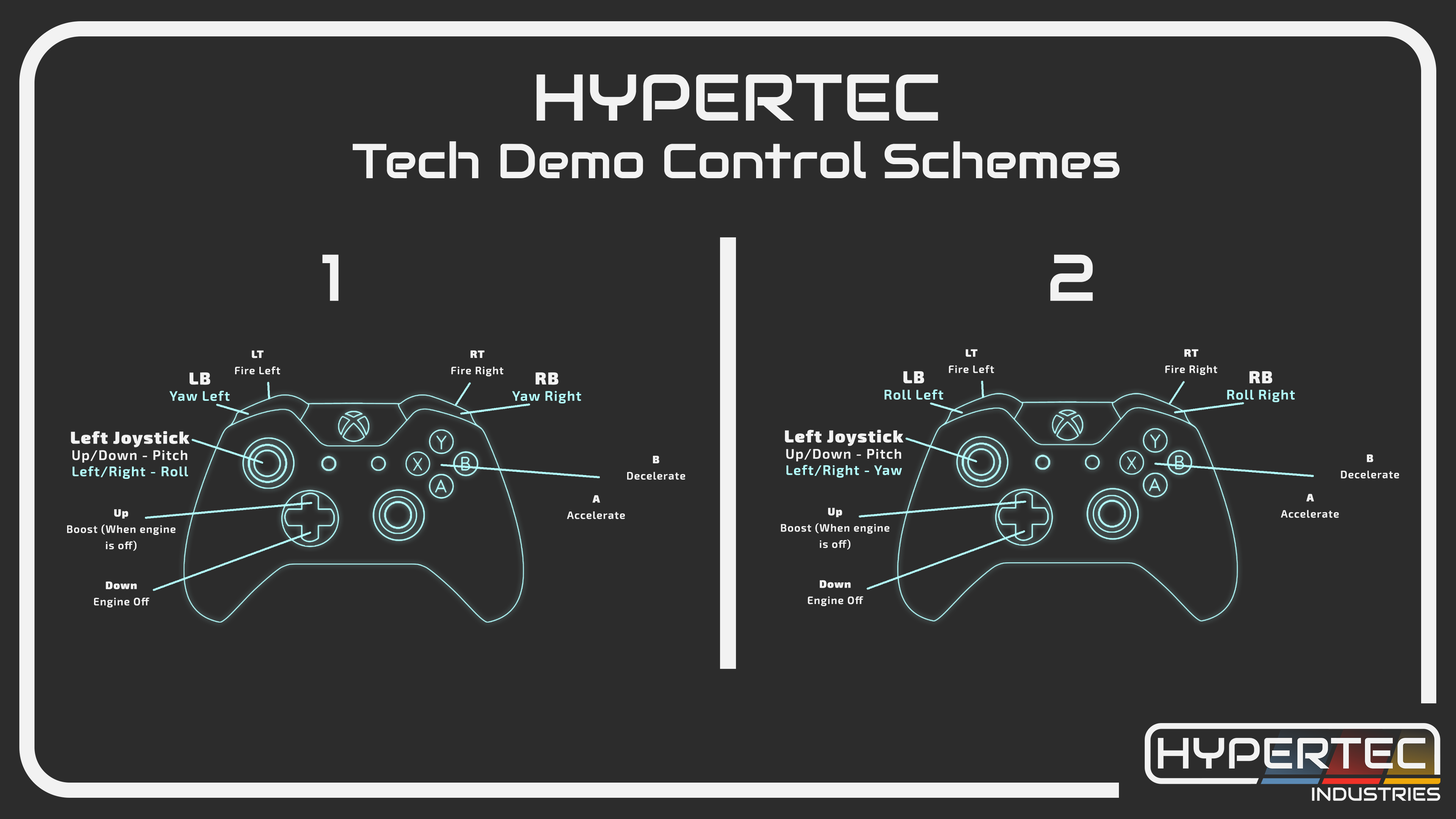
<style>
.page{position:relative;width:1456px;height:819px;background:#2c2c2c}
.page>*{position:absolute;margin:0}
.t1{font:48.9px/57.6px "Audiowide-Regular";color:#f2f2f2}
.t2{font:65.6px/57.6px "Audiowide-Regular";color:#f2f2f2}
.t3{font:65.6px "Audiowide-Regular";letter-spacing:5.2em;color:#f2f2f2}
.t4{font:10.6px/16.3px "Exo2-SemiBold";letter-spacing:0.06em;color:#f2f2f2}
.t5{font:10.6px/16.3px "Exo2-Black";letter-spacing:0.06em;color:#f2f2f2}
.t6{font:13.7px/16.3px "Exo2-SemiBold";letter-spacing:0.06em;color:#b4ffff}
.t7{font:17.1px/16.3px "Exo2-Black";letter-spacing:0.06em;color:#f2f2f2}
.t8{font:13.7px/16.3px "Exo2-SemiBold";letter-spacing:0.06em;color:#b3fdfd}
.t9{font:13.7px/16.3px "Exo2-SemiBold";letter-spacing:0.06em;color:#f2f2f2}
</style>
<div class="page">
<p class="t1" style="left:353px;top:74px;width:767px;height:104px;text-align:center"><span class="t2">HYPERTEC<br></span>Tech Demo Control Schemes</p>
<p class="t3" style="left:322px;top:254px;width:771px;height:47px">1 2</p>
<p class="t4" style="left:235px;top:350px;width:45px;height:25px;text-align:center"><span class="t5">LT<br></span>Fire Left</p>
<p class="t4" style="left:451px;top:350px;width:53px;height:27px;text-align:center"><span class="t5">RT<br></span>Fire Right</p>
<p class="t4" style="left:949px;top:349px;width:45px;height:24px;text-align:center"><span class="t5">LT<br></span>Fire Left</p>
<p class="t4" style="left:1165px;top:349px;width:52px;height:26px;text-align:center"><span class="t5">RT<br></span>Fire Right</p>
<p class="t6" style="left:169px;top:372px;width:61px;height:29px;text-align:center"><span class="t7">LB<br></span>Yaw Left</p>
<p class="t6" style="left:512px;top:372px;width:69px;height:31px;text-align:center"><span class="t7">RB<br></span>Yaw Right</p>
<p class="t8" style="left:885px;top:371px;width:58px;height:29px;text-align:center"><span class="t7">LB<br></span>Roll Left</p>
<p class="t8" style="left:1227px;top:371px;width:68px;height:31px;text-align:center"><span class="t7">RB<br></span>Roll Right</p>
<p class="t6" style="left:71px;top:431px;width:119px;height:48px;text-align:center"><span class="t7">Left Joystick<br></span><span class="t9">Up/Down - Pitch<br></span>Left/Right - Roll</p>
<p class="t6" style="left:785px;top:430px;width:119px;height:48px;text-align:center"><span class="t7">Left Joystick<br></span><span class="t9">Up/Down - Pitch<br></span>Left/Right - Yaw</p>
<p class="t4" style="left:627px;top:456px;width:58px;height:24px;text-align:center"><span class="t5">B<br></span>Decelerate</p>
<p class="t4" style="left:1341px;top:454px;width:58px;height:25px;text-align:center"><span class="t5">B<br></span>Decelerate</p>
<p class="t4" style="left:567px;top:495px;width:58px;height:24px;text-align:center"><span class="t5">A<br></span>Accelerate</p>
<p class="t4" style="left:1281px;top:494px;width:58px;height:24px;text-align:center"><span class="t5">A<br></span>Accelerate</p>
<p class="t4" style="left:67px;top:509px;width:109px;height:42px;text-align:center"><span class="t5">Up<br></span>Boost (When engine is off)</p>
<p class="t4" style="left:781px;top:508px;width:109px;height:42px;text-align:center"><span class="t5">Up<br></span>Boost (When engine is off)</p>
<p class="t4" style="left:94px;top:581px;width:55px;height:26px;text-align:center"><span class="t5">Down<br></span>Engine Off</p>
<p class="t4" style="left:808px;top:580px;width:55px;height:26px;text-align:center"><span class="t5">Down<br></span>Engine Off</p>
</div>
